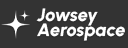
<style>
.page{position:relative;width:128px;height:48px;background:#333333}
.page>*{position:absolute;margin:0}
.t1{font:18px/15px "UrbanistItalic-ExtraBoldItalic";color:#ffffff}
</style>
<div class="page">
<p class="t1" style="left:36px;top:8px;width:89px;height:33px">Jowsey<br>Aerospace</p>
</div>
